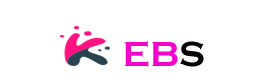
<style>
.page{position:relative;width:268px;height:84px;background:#ffffff}
.page>*{position:absolute;margin:0}
.t1{font:36px "CopperplateGothic-Bold";color:#f304c9}
.t2{font:36px "CopperplateGothic-Bold";color:#080303}
</style>
<div class="page">
<p class="t1" style="left:124px;top:40px;width:80px;height:28px">EB<span class="t2">S</span></p>
</div>
